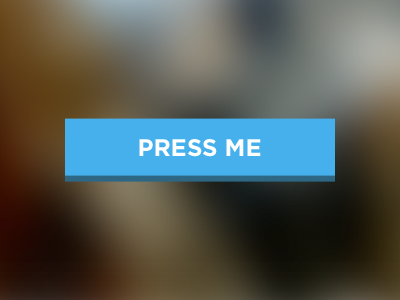
<style>
.page{position:relative;width:400px;height:300px}
.page>*{position:absolute;margin:0}
.t1{font:24px "Gotham-Bold";color:#ffffff}
</style>
<div class="page">
<p class="t1" style="left:139px;top:139px;width:122px;height:18px">PRESS ME</p>
</div>
